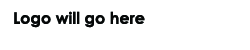
<style>
.page{position:relative;width:250px;height:50px;background:#ffffff}
.page>*{position:absolute;margin:0}
.t1{font:16px "CenturyGothic-Bold";color:#060808}
</style>
<div class="page">
<p class="t1" style="left:14px;top:11px;width:131px;height:17px">Logo will go here</p>
</div>
